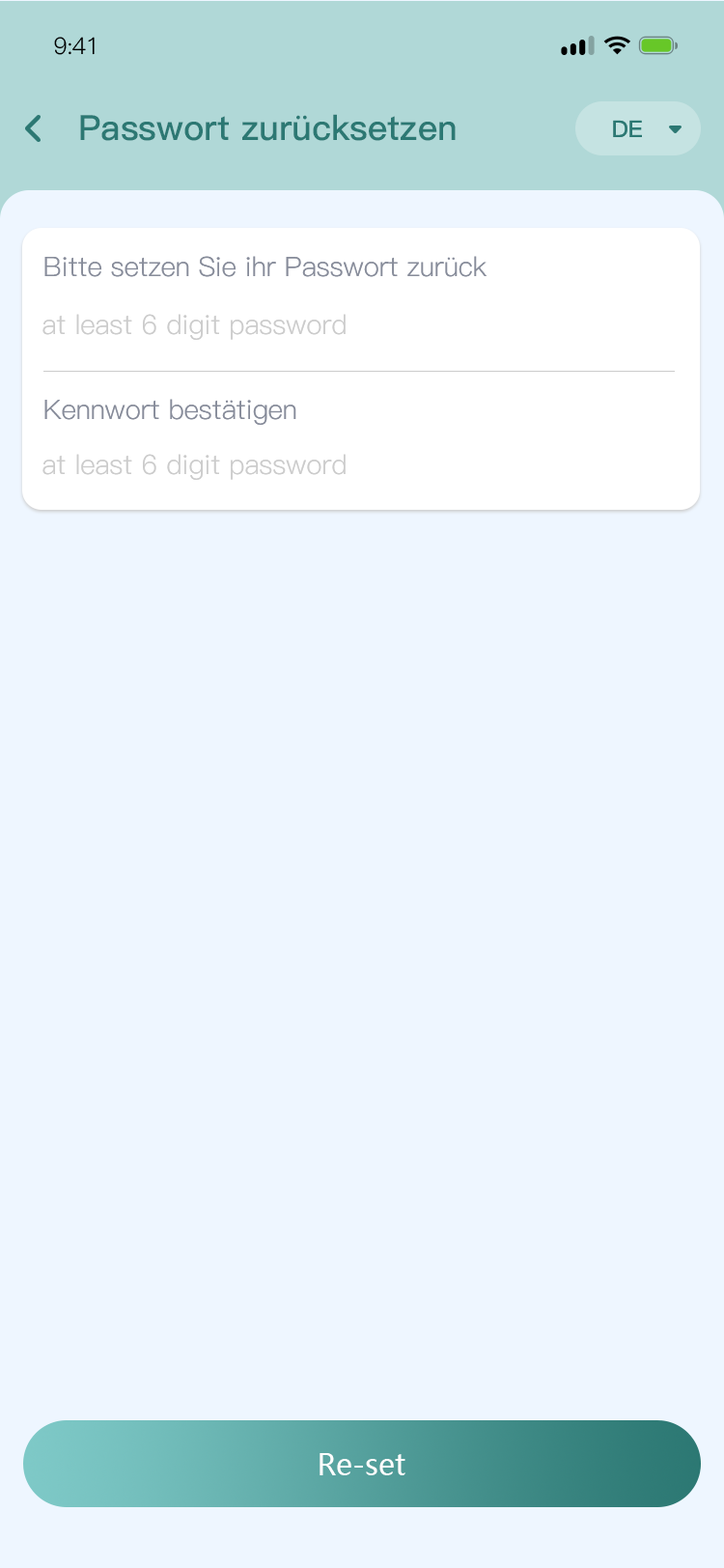
<style>
.page{position:relative;width:724px;height:1568px;background:#eef6ff}
.page>*{position:absolute;margin:0}
.t1{font:23.2px "PingFang-SC-Regular";letter-spacing:-0.025em;color:#000000}
.t2{font:34.8px "PingFang-SC-Bold";color:#2c7873}
.t3{font:23.2px "PingFang-SC-Bold";color:#2c7873}
.t4{font:27px "PingFang-SC-Regular";color:#878c9a}
.t5{font:27px "PingFang-SC-Regular";color:#cccccc}
.t6{font:29px "MicrosoftYaHei";color:#ffffff}
</style>
<div class="page">
<p class="t1" style="left:54px;top:37px;width:41px;height:18px">9:41</p>
<p class="t2" style="left:80px;top:114px;width:376px;height:27px">Passwort zurücksetzen</p>
<p class="t3" style="left:613px;top:120px;width:29px;height:17px">DE</p>
<p class="t4" style="left:44px;top:256px;width:444px;height:21px">Bitte setzen Sie ihr Passwort zurück</p>
<p class="t5" style="left:42px;top:314px;width:304px;height:26px">at least 6 digit password</p>
<p class="t4" style="left:44px;top:399px;width:252px;height:26px">Kennwort bestätigen</p>
<p class="t5" style="left:42px;top:454px;width:304px;height:26px">at least 6 digit password</p>
<p class="t6" style="left:320px;top:1453px;width:86px;height:22px">Re-set</p>
</div>
